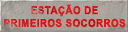
<style>
.page{position:relative;width:128px;height:32px}
.page>*{position:absolute;margin:0}
.t1{font:10.7px "Arial-BoldMT";letter-spacing:0.03em;color:#db1d1c;font-weight:bold;scale:0.9 1}
</style>
<div class="page">
<p class="t1" style="left:4px;top:4px;width:122px;height:24px;text-align:center">ESTAÇÃO DE<br>PRIMEIROS SOCORROS</p>
</div>
